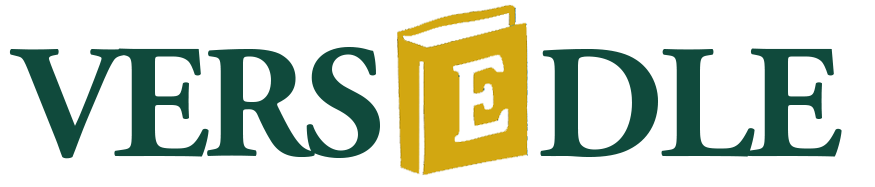
<style>
.page{position:relative;width:875px;height:187px;background:#ffffff}
.page>*{position:absolute;margin:0}
.t1{font:162px "AGaramondPro-Bold";letter-spacing:-0.04em;color:#104a3c}
</style>
<div class="page">
<p class="t1" style="left:9px;top:46px;width:371px;height:113px">VERS</p>
<p class="t1" style="left:540px;top:48px;width:302px;height:109px">DLE</p>
</div>
